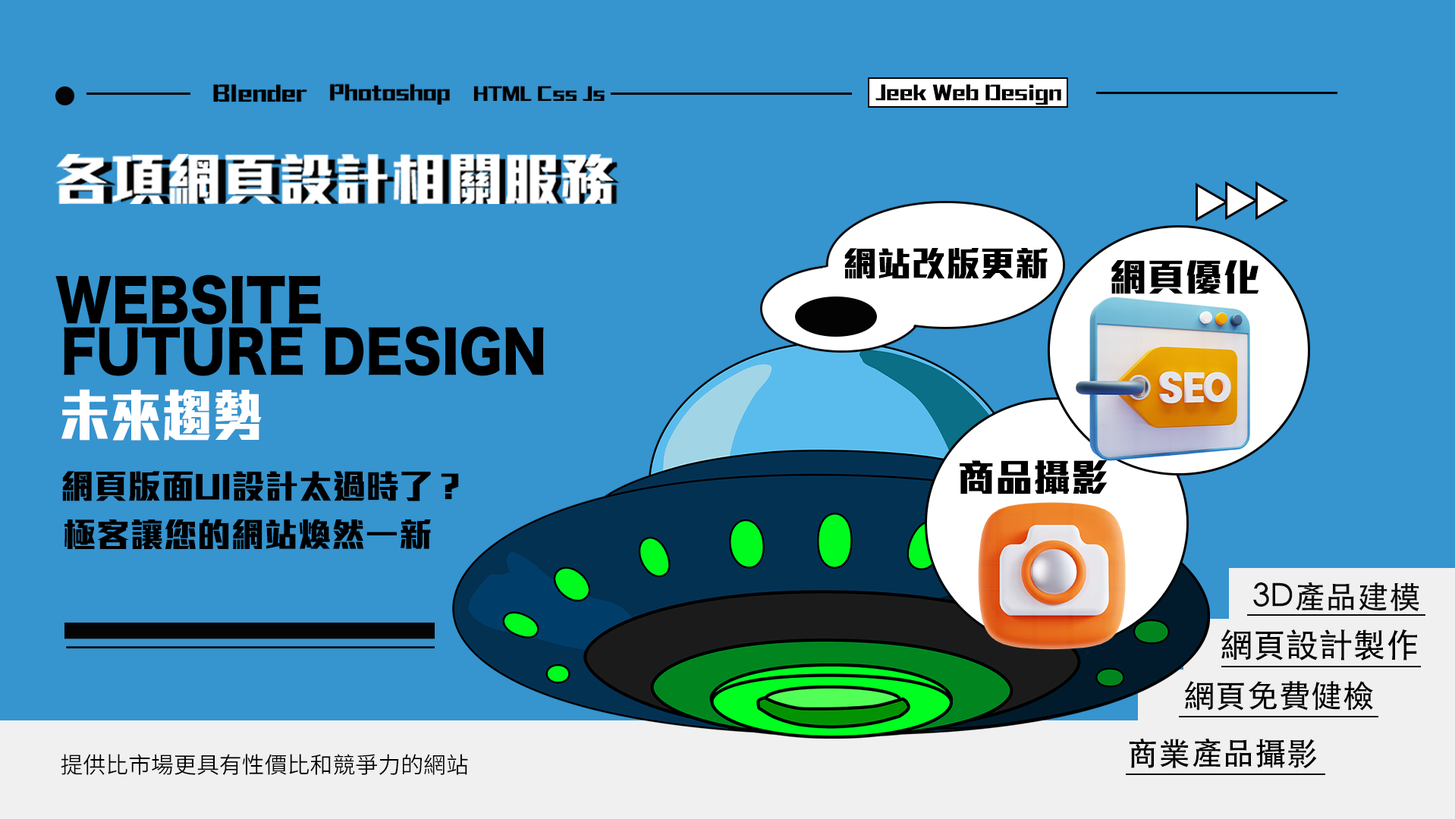
<style>
.page{position:relative;width:1455px;height:819px;background:#3694cf}
.page>*{position:absolute;margin:0}
.t1{font:20.8px "MStiffHeiHK-UltraBold";color:#000000}
.t2{font:34.5px "MStiffHeiHK-UltraBold";color:#000000}
.t3{font:37.9px "MStiffHeiHK-UltraBold";color:#000000}
.t4{font:57.1px "HiraKakuStd-W8";color:#000000;scale:0.89 1}
.t5{font:57.1px "MStiffHeiHK-UltraBold";color:#ffffff;scale:0.89 1}
.t6{font:33.6px "MStiffHeiHK-UltraBold";color:#000000}
.t7{font:31.7px "STHeitiTC-Medium";color:#0b0b0b}
.t8{font:33.3px "STHeitiTC-Medium";color:#000000}
.t9{font:31.9px "STHeitiTC-Medium";color:#000000}
.t10{font:22.7px "SourceHanSansTW-Normal";color:#000000}
</style>
<div class="page">
<p class="t1" style="left:875px;top:84px;width:186px;height:21px">Jeek Web Design</p>
<p class="t2" style="left:844px;top:248px;width:204px;height:31px">網站改版更新</p>
<p class="t3" style="left:1112px;top:260px;width:147px;height:34px">網頁優化</p>
<p class="t4" style="left:55px;top:275px;width:266px;height:50px">WEBSITE</p>
<p class="t4" style="left:64px;top:326px;width:480px;height:50px">FUTURE DESIGN</p>
<p class="t5" style="left:61px;top:389px;width:201px;height:52px">未來趨勢</p>
<p class="t3" style="left:960px;top:461px;width:148px;height:34px">商品攝影</p>
<p class="t6" style="left:62px;top:471px;width:397px;height:31px">網頁版面UI設計太過時了？</p>
<p class="t6" style="left:64px;top:519px;width:367px;height:30px">極客讓您的網站煥然一新</p>
<p class="t7" style="left:1253px;top:582px;width:167px;height:30px">3D產品建模</p>
<p class="t8" style="left:1221px;top:629px;width:196px;height:32px">網頁設計製作</p>
<p class="t9" style="left:1184px;top:681px;width:189px;height:30px">網頁免費健檢</p>
<p class="t9" style="left:1129px;top:738px;width:188px;height:31px">商業產品攝影</p>
<p class="t10" style="left:61px;top:754px;width:407px;height:21px">提供比市場更具有性價比和競爭力的網站</p>
</div>
